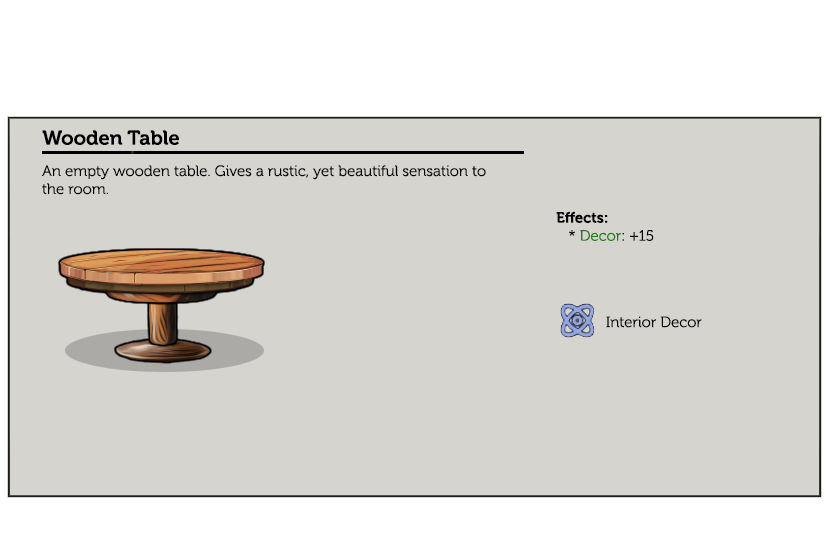
<style>
.page{position:relative;width:830px;height:550px;background:#d6d4cf}
.page>*{position:absolute;margin:0}
.t1{font:20px "Museo-700";color:#000000}
.t2{font:15px "Museo-300";color:#000000}
.t3{font:15px "Museo-700";color:#000000}
.t4{font:15px "Museo-300";color:#247d1a}
.t5{font:15px "Museo-300";color:#020202}
</style>
<div class="page">
<p class="t1" style="left:42px;top:130px;width:137px;height:15px">Wooden Table</p>
<p class="t2" style="left:42px;top:165px;width:444px;height:30px">An empty wooden table. Gives a rustic, yet beautiful sensation to the room.</p>
<p class="t3" style="left:556px;top:211px;width:98px;height:30px">Effects:<br><span class="t2">   * </span><span class="t4">Decor</span><span class="t2">: +15</span></p>
<p class="t5" style="left:606px;top:316px;width:96px;height:12px">Interior Decor</p>
</div>
